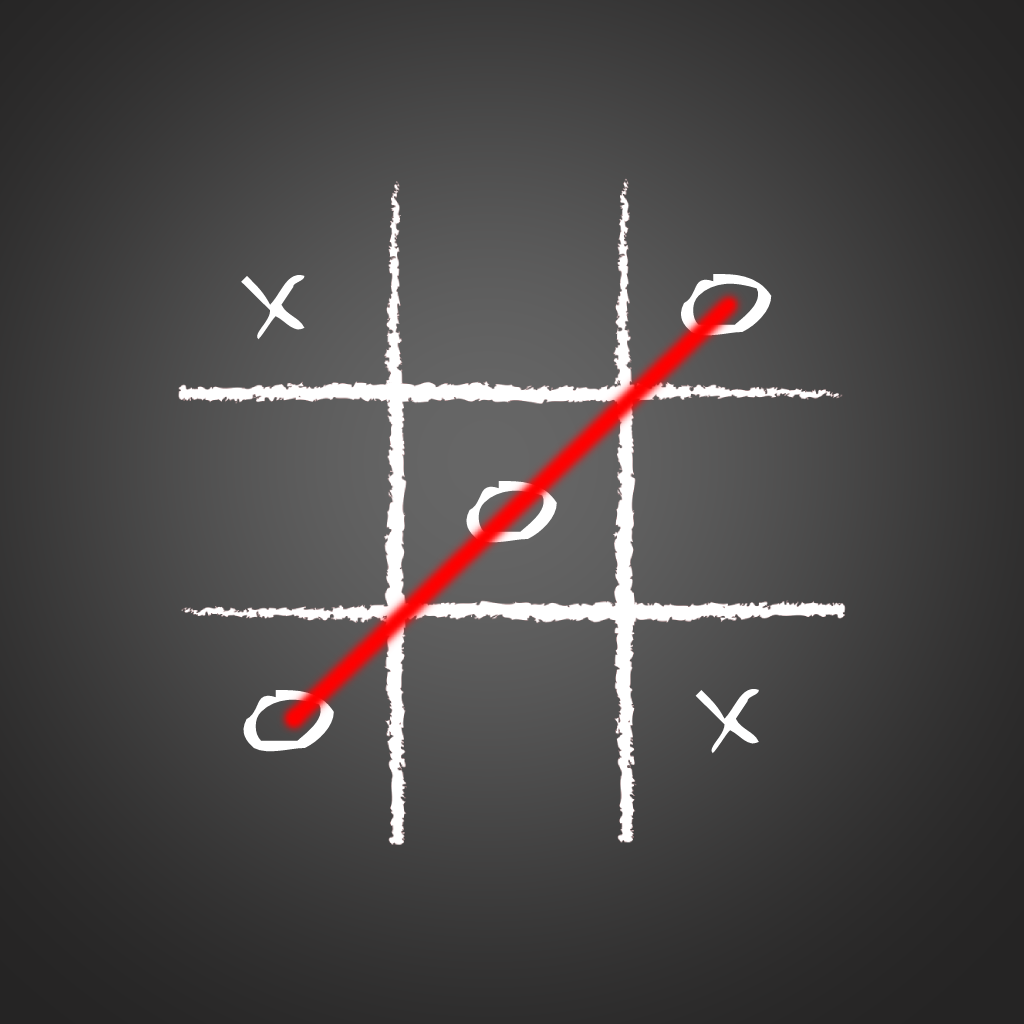
<style>
.page{position:relative;width:1024px;height:1024px}
.page>*{position:absolute;margin:0}
.t1{font:115.7px "2Dumb";color:#ffffff}
</style>
<div class="page">
<p class="t1" style="left:241px;top:275px;width:64px;height:65px">x</p>
<p class="t1" style="left:681px;top:274px;width:91px;height:62px">o</p>
<p class="t1" style="left:466px;top:481px;width:91px;height:62px">o</p>
<p class="t1" style="left:695px;top:689px;width:64px;height:65px">x</p>
<p class="t1" style="left:243px;top:690px;width:91px;height:62px">o</p>
</div>
